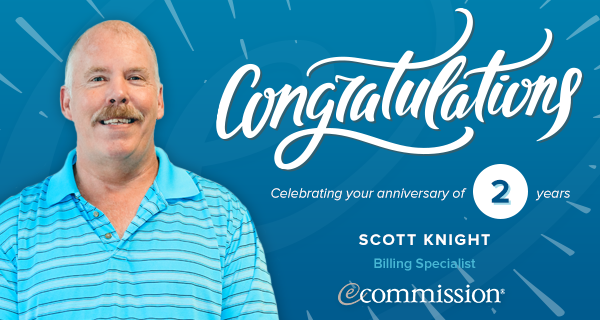
<style>
.page{position:relative;width:600px;height:320px}
.page>*{position:absolute;margin:0}
.t1{font:34px "ProximaNova-Bold";color:#005488}
.t2{font:14px "ProximaNova-RegularIt";color:#ffffff}
.t3{font:16px "ProximaNova-Bold";letter-spacing:0.1em;color:#ffffff;text-transform:uppercase}
.t4{font:14px "ProximaNova-Semibold";color:#46b7d5}
</style>
<div class="page">
<p class="t1" style="left:491px;top:179px;width:18px;height:24px">2</p>
<p class="t2" style="left:271px;top:188px;width:196px;height:13px">Celebrating your anniversary of</p>
<p class="t2" style="left:535px;top:190px;width:35px;height:11px">years</p>
<p class="t3" style="left:359px;top:234px;width:131px;height:11px">Scott Knight</p>
<p class="t4" style="left:374px;top:258px;width:102px;height:13px">Billing Specialist</p>
</div>
